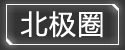
<style>
.page{position:relative;width:125px;height:50px}
.page>*{position:absolute;margin:0}
.t1{font:27px "MicrosoftYaHei";letter-spacing:0.05em;color:#ffffff}
</style>
<div class="page">
<p class="t1" style="left:20px;top:11px;width:83px;height:27px">北极圈</p>
</div>
